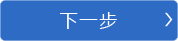
<style>
.page{position:relative;width:178px;height:41px;background:#2e6bc5}
.page>*{position:absolute;margin:0}
.t1{font:18px "MicrosoftYaHei";letter-spacing:0.1em;color:#ffffff}
</style>
<div class="page">
<p class="t1" style="left:60px;top:12px;width:57px;height:17px">下一步</p>
</div>
